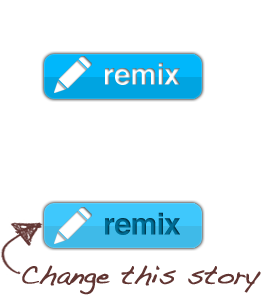
<style>
.page{position:relative;width:264px;height:300px;background:#ffffff}
.page>*{position:absolute;margin:0}
.t1{font:30px "Helvetica-Bold";letter-spacing:-0.025em}
.t2{font:30px "Helvetica-Bold";letter-spacing:-0.025em;color:#006e96}
.t3{font:26px "Handwriting-Dakota";color:#613532;font-weight:bold}
</style>
<div class="page">
<p class="t1" style="left:105px;top:62px;width:75px;height:23px">remix</p>
<p class="t2" style="left:105px;top:212px;width:75px;height:23px">remix</p>
<p class="t3" style="left:22px;top:265px;width:239px;height:30px">Change this story</p>
</div>
